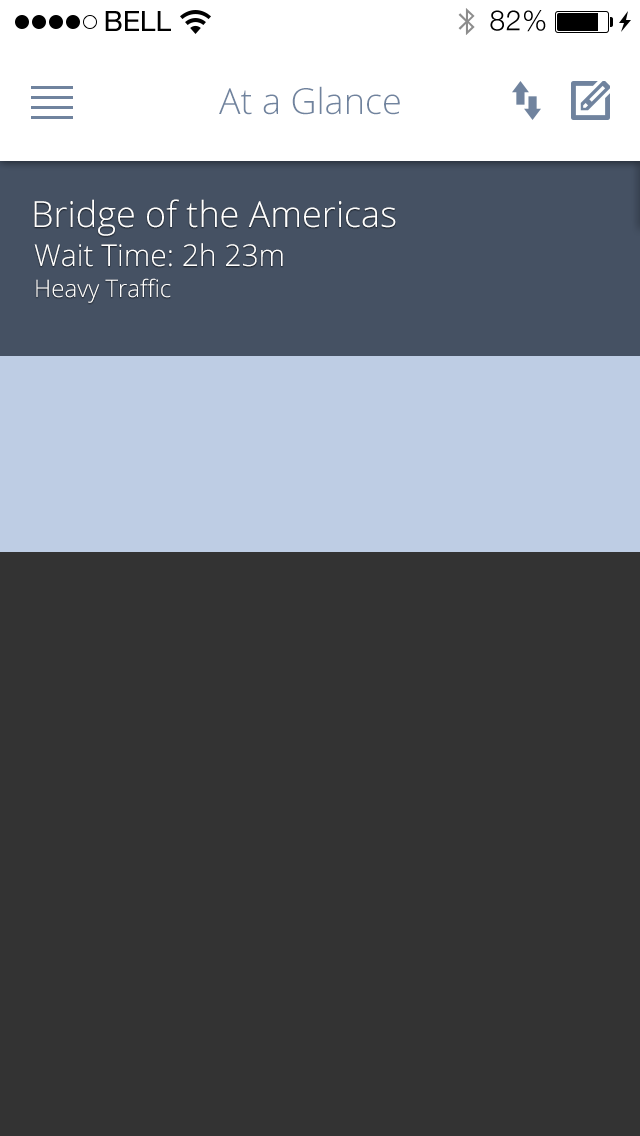
<style>
.page{position:relative;width:640px;height:1136px;background:#333333}
.page>*{position:absolute;margin:0}
.t1{font:36px "OpenSans-Light";color:#70839e}
.t2{font:36px "OpenSans-Light";color:#ffffff}
.t3{font:30px "OpenSans-Light";color:#ffffff}
.t4{font:24px "OpenSans-Light";color:#ffffff}
</style>
<div class="page">
<p class="t1" style="left:219px;top:86px;width:181px;height:29px">At a Glance</p>
<p class="t2" style="left:34px;top:199px;width:362px;height:37px">Bridge of the Americas</p>
<p class="t3" style="left:34px;top:243px;width:249px;height:24px">Wait Time: 2h 23m</p>
<p class="t4" style="left:36px;top:278px;width:135px;height:25px">Heavy Traffic</p>
</div>
